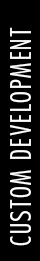
<style>
.page{position:relative;width:40px;height:261px;background:#000000}
.page>*{position:absolute;margin:0}
.t1{font:28px "FuturaStd-CondensedLight";letter-spacing:0.06em;color:#ffffff;text-transform:uppercase}
</style>
<div class="page">
<p class="t1" style="left:10px;top:27px;width:21px;height:219px;rotate:-90deg">Custom Development</p>
</div>
